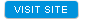
<style>
.page{position:relative;width:98px;height:19px;background:#0092dc}
.page>*{position:absolute;margin:0}
.t1{font:10px "ArialMT";color:#ffffff}
</style>
<div class="page">
<p class="t1" style="left:14px;top:6px;width:53px;height:7px">VISIT SITE</p>
</div>
